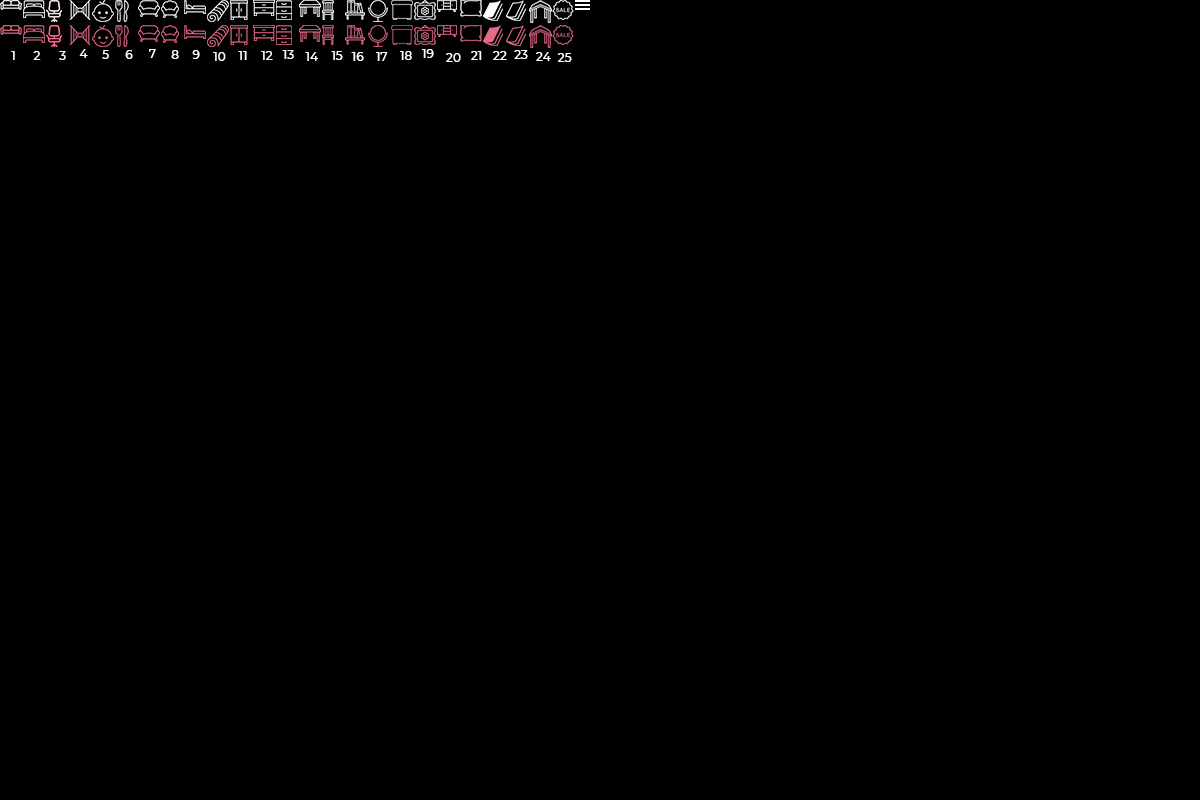
<style>
.page{position:relative;width:1200px;height:800px;background:#000000}
.page>*{position:absolute;margin:0}
.t1{font:12px "Montserrat-Medium";color:#fefefe}
</style>
<div class="page">
<p class="t1" style="left:11px;top:51px;width:4px;height:9px">1</p>
<p class="t1" style="left:33px;top:51px;width:8px;height:9px">2</p>
<p class="t1" style="left:59px;top:51px;width:7px;height:9px">3</p>
<p class="t1" style="left:79px;top:49px;width:9px;height:9px">4</p>
<p class="t1" style="left:102px;top:50px;width:7px;height:9px">5</p>
<p class="t1" style="left:125px;top:50px;width:8px;height:9px">6</p>
<p class="t1" style="left:149px;top:49px;width:7px;height:9px">7</p>
<p class="t1" style="left:171px;top:50px;width:8px;height:9px">8</p>
<p class="t1" style="left:192px;top:50px;width:8px;height:9px">9</p>
<p class="t1" style="left:213px;top:52px;width:13px;height:9px">10</p>
<p class="t1" style="left:238px;top:51px;width:9px;height:9px">11</p>
<p class="t1" style="left:261px;top:51px;width:12px;height:9px">12</p>
<p class="t1" style="left:282px;top:50px;width:12px;height:9px">13</p>
<p class="t1" style="left:305px;top:52px;width:13px;height:9px">14</p>
<p class="t1" style="left:331px;top:51px;width:12px;height:9px">15</p>
<p class="t1" style="left:351px;top:52px;width:13px;height:9px">16</p>
<p class="t1" style="left:376px;top:52px;width:12px;height:9px">17</p>
<p class="t1" style="left:400px;top:51px;width:12px;height:9px">18</p>
<p class="t1" style="left:422px;top:49px;width:12px;height:9px">19</p>
<p class="t1" style="left:446px;top:53px;width:15px;height:9px">20</p>
<p class="t1" style="left:471px;top:51px;width:11px;height:9px">21</p>
<p class="t1" style="left:493px;top:51px;width:14px;height:9px">22</p>
<p class="t1" style="left:514px;top:50px;width:14px;height:9px">23</p>
<p class="t1" style="left:536px;top:52px;width:15px;height:9px">24</p>
<p class="t1" style="left:557px;top:53px;width:15px;height:9px">25</p>
</div>
